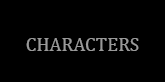
<style>
.page{position:relative;width:165px;height:82px;background:#000000}
.page>*{position:absolute;margin:0}
.t1{font:19.1px "Cambria";color:#999999}
</style>
<div class="page">
<p class="t1" style="left:26px;top:38px;width:113px;height:13px">CHARACTERS</p>
</div>
